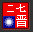
<style>
.page{position:relative;width:33px;height:32px;background:#f20000}
.page>*{position:absolute;margin:0}
.t1{font:10.4px "SimSun";color:#ffffff}
.t2{font:11.7px "SimSun";color:#ffffff}
</style>
<div class="page">
<p class="t1" style="left:7px;top:4px;width:19px;height:8px">二七</p>
<p class="t2" style="left:16px;top:15px;width:11px;height:12px">晋</p>
</div>
